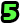
<style>
.page{position:relative;width:20px;height:24px;background:#000000}
.page>*{position:absolute;margin:0}
.t1{font:24px "ErasITC-Bold";color:#5afd44}
</style>
<div class="page">
<p class="t1" style="left:3px;top:4px;width:14px;height:16px">5</p>
</div>
